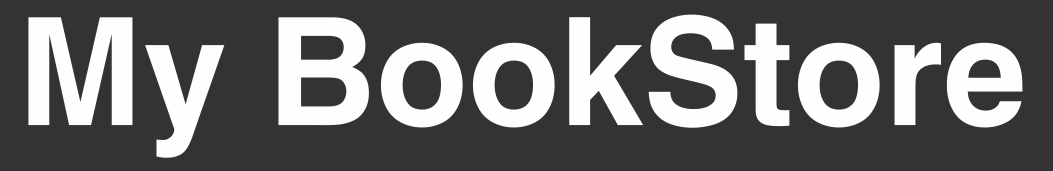
<style>
.page{position:relative;width:1053px;height:171px;background:#333333}
.page>*{position:absolute;margin:0}
.t1{font:150px "HelveticaCE-Bold";color:#fefefe}
</style>
<div class="page">
<p class="t1" style="left:28px;top:14px;width:995px;height:144px">My BookStore</p>
</div>
